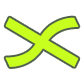
<style>
.page{position:relative;width:84px;height:84px;background:#ffffff}
.page>*{position:absolute;margin:0}
.t1{font:93.1px "NovaOval";letter-spacing:-0.005em;color:#c8ff1f}
</style>
<div class="page">
<p class="t1" style="left:5px;top:17px;width:74px;height:50px;rotate:90deg">X</p>
</div>
